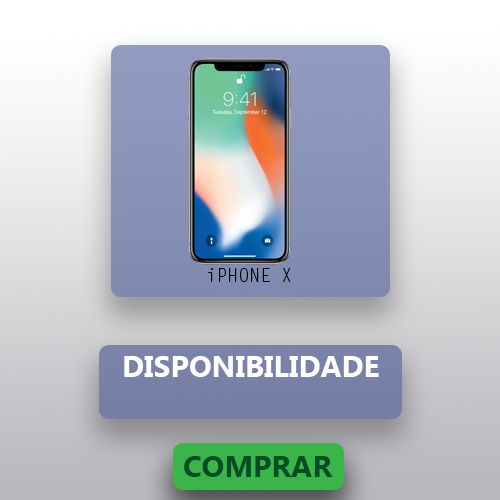
<style>
.page{position:relative;width:500px;height:500px}
.page>*{position:absolute;margin:0}
.t1{font:18px "LetterGothicStd";color:#000000}
.t2{font:30px "MicrosoftTaiLe-Bold";color:#ffffff}
.t3{font:30px "MicrosoftTaiLe-Bold";color:#044d24}
</style>
<div class="page">
<p class="t1" style="left:208px;top:268px;width:83px;height:14px">iPHONE X</p>
<p class="t2" style="left:124px;top:356px;width:255px;height:21px">DISPONIBILIDADE</p>
<p class="t3" style="left:184px;top:456px;width:149px;height:21px">COMPRAR</p>
</div>
